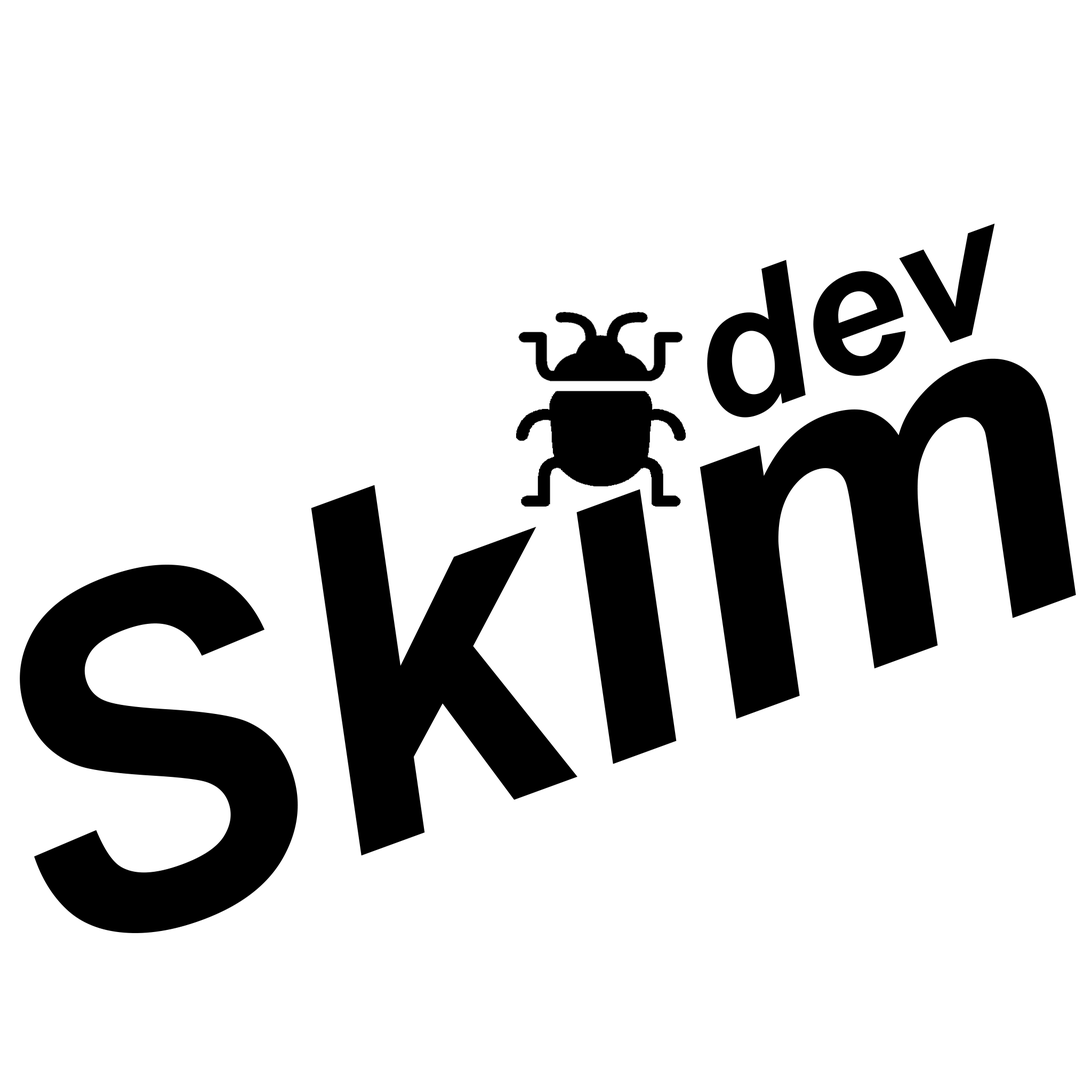
<style>
.page{position:relative;width:1092px;height:1092px;background:#ffffff}
.page>*{position:absolute;margin:0}
.t1{font:186.6px "Arial-BoldItalicMT";color:#000000}
.t2{font:479.9px "Arial-BoldItalicMT";color:#000000}
</style>
<div class="page">
<p class="t1" style="left:707px;top:223px;width:288px;height:194px;rotate:-20deg">dev</p>
<p class="t2" style="left:20px;top:358px;width:1056px;height:575px;rotate:-20deg">Skim</p>
</div>
